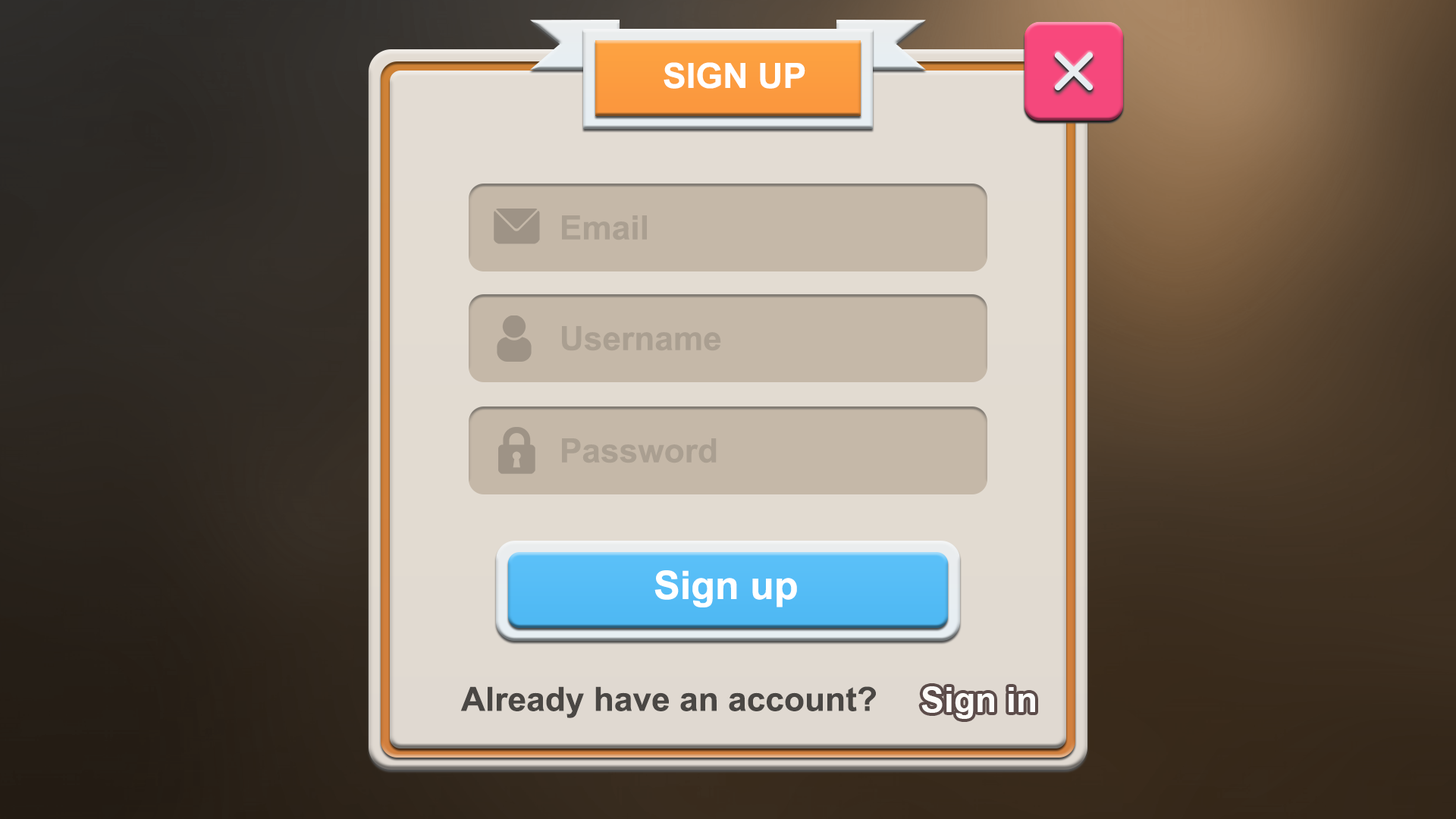
<style>
.page{position:relative;width:1456px;height:819px}
.page>*{position:absolute;margin:0}
.t1{font:34.9px "Arial-BoldMT";color:#ffffff}
.t2{font:33.4px "Arial-BoldMT";color:#aa9f91}
.t3{font:39.4px "Arial-BoldMT";color:#ffffff}
.t4{font:33.4px "Arial-BoldMT";color:#4a4744}
</style>
<div class="page">
<p class="t1" style="left:664px;top:62px;width:141px;height:27px">SIGN UP</p>
<p class="t2" style="left:562px;top:215px;width:85px;height:25px">Email</p>
<p class="t2" style="left:562px;top:326px;width:159px;height:25px">Username</p>
<p class="t2" style="left:562px;top:438px;width:155px;height:25px">Password</p>
<p class="t3" style="left:654px;top:570px;width:143px;height:37px">Sign up</p>
<p class="t4" style="left:460px;top:686px;width:416px;height:32px">Already have an account?</p>
<p class="t1" style="left:921px;top:686px;width:114px;height:33px">Sign in</p>
</div>
